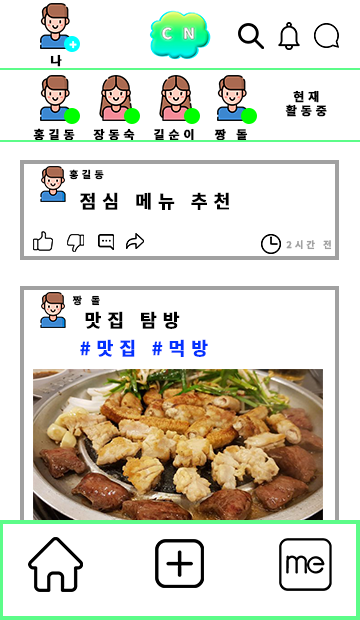
<style>
.page{position:relative;width:360px;height:620px;background:#ffffff}
.page>*{position:absolute;margin:0}
.t1{font:12px "NotoSansKR-Bold";letter-spacing:0.3em;color:#ffffff;font-weight:bold}
.t2{font:12px "NotoSansKR-Bold";letter-spacing:0.3em;color:#000000;font-weight:bold}
.t3{font:9.9px "NotoSansKR-Bold";letter-spacing:0.3em;color:#000000;font-weight:bold}
.t4{font:18.2px "NotoSansKR-Bold";letter-spacing:0.3em;color:#000000;font-weight:bold}
.t5{font:9.2px "NotoSansKR-Bold";letter-spacing:0.3em;color:#a1a1a1;font-weight:bold}
.t6{font:18.2px "NotoSansKR-Bold";letter-spacing:0.3em;color:#0332fe;font-weight:bold}
</style>
<div class="page">
<p class="t1" style="left:69px;top:41px;width:8px;height:8px">+</p>
<p class="t2" style="left:50px;top:54px;width:12px;height:13px">나</p>
<p class="t2" style="left:285px;top:90px;width:42px;height:27px;text-align:center">현재<br>활동중</p>
<p class="t2" style="left:33px;top:128px;width:42px;height:13px">홍길동</p>
<p class="t2" style="left:93px;top:128px;width:42px;height:13px">장동숙</p>
<p class="t2" style="left:154px;top:128px;width:40px;height:13px">길순이</p>
<p class="t2" style="left:214px;top:128px;width:34px;height:13px">짱 돌</p>
<p class="t3" style="left:69px;top:169px;width:35px;height:11px">홍길동</p>
<p class="t4" style="left:80px;top:192px;width:149px;height:18px">점심 메뉴 추천</p>
<p class="t5" style="left:286px;top:240px;width:46px;height:10px">2시간 전</p>
<p class="t3" style="left:72px;top:295px;width:28px;height:11px">짱 돌</p>
<p class="t4" style="left:85px;top:311px;width:95px;height:18px">맛집 탐방</p>
<p class="t6" style="left:80px;top:339px;width:55px;height:18px">#맛집</p>
<p class="t6" style="left:152px;top:339px;width:56px;height:18px">#먹방</p>
</div>
